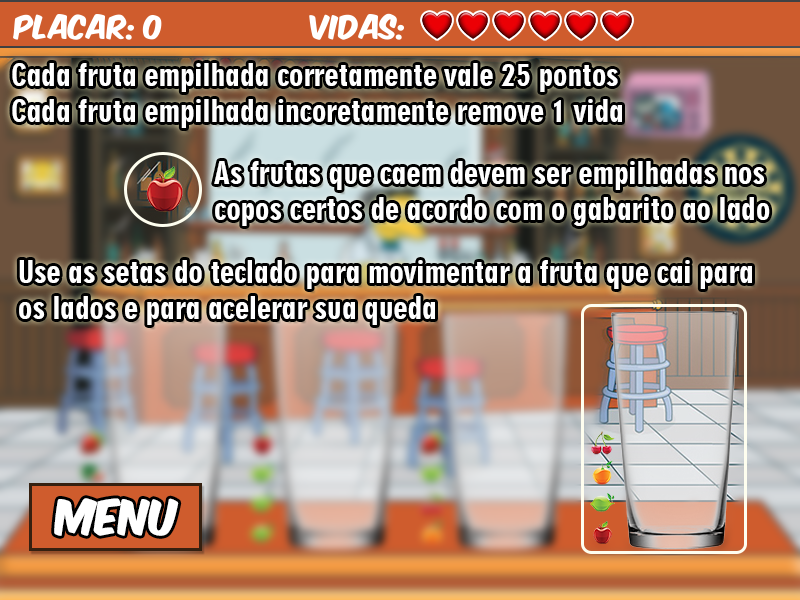
<style>
.page{position:relative;width:800px;height:600px}
.page>*{position:absolute;margin:0}
.t1{font:30px "Geometric706BT-BlackCondensedB";color:#ffffff}
.t2{font:42px "KomikaAxis";color:#ffffff}
</style>
<div class="page">
<p class="t1" style="left:12px;top:63px;width:610px;height:65px">Cada fruta empilhada corretamente vale 25 pontos<br>Cada fruta empilhada incoretamente remove 1 vida</p>
<p class="t1" style="left:214px;top:161px;width:556px;height:65px">As frutas que caem devem ser empilhadas nos copos certos de acordo com o gabarito ao lado</p>
<p class="t1" style="left:19px;top:260px;width:733px;height:65px">Use as setas do teclado para movimentar a fruta que cai para<br>os lados e para acelerar sua queda</p>
<p class="t2" style="left:54px;top:498px;width:125px;height:38px">MENU</p>
</div>
